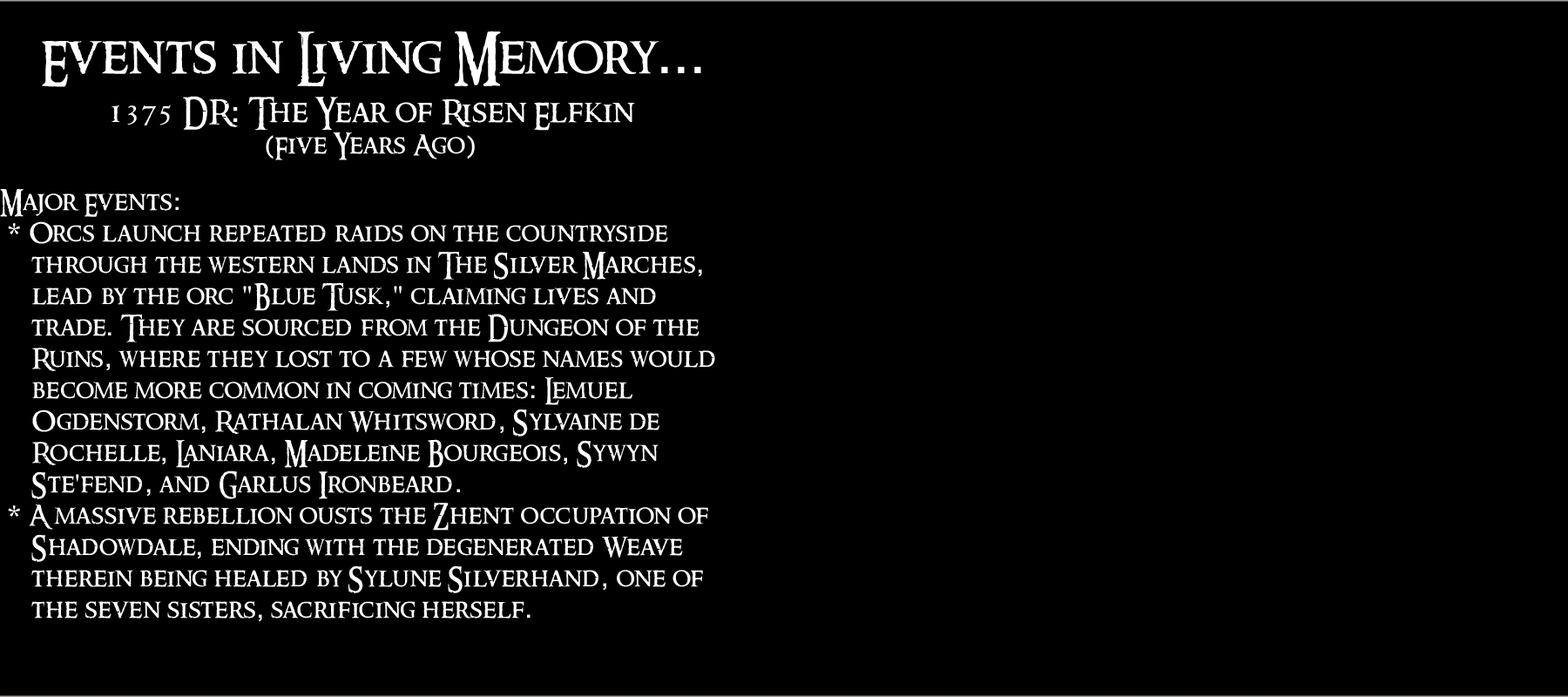
<style>
.page{position:relative;width:1568px;height:697px;background:#000000}
.page>*{position:absolute;margin:0}
.t1{font:26.1px "RingbearerMedium";letter-spacing:0.025em;color:#ffffff}
.t2{font:15.7px "RingbearerMedium";letter-spacing:0.025em;color:#ffffff}
.t3{font:52.3px "RingbearerMedium";letter-spacing:0.025em;color:#ffffff}
.t4{font:52.3px "Rockwell";letter-spacing:0.025em;color:#ffffff}
.t5{font:31.4px "RingbearerMedium";letter-spacing:0.025em;color:#ffffff}
.t6{font:31.4px "Rockwell";letter-spacing:0.025em;color:#ffffff}
.t7{font:26.1px "Rockwell";letter-spacing:0.025em;color:#ffffff}
</style>
<div class="page">
<p class="t1" style="left:0px;top:31px;width:715px;height:590px;text-align:center"><span class="t2"><br></span><span class="t3">Events in Living Memory</span><span class="t4">...<br><br></span><span class="t5">1375 DR</span><span class="t6">:</span><span class="t5"> The Year of Risen Elfkin<br></span><span class="t7">(</span>Five Years Ago<span class="t7">)<br><br></span>Major Events<span class="t7">:<br> * </span>Orcs launch repeated raids on the countryside <br> through the western lands in The Silver Marches<span class="t7">,<br></span> lead by the orc <span class="t7">"</span>Blue Tusk<span class="t7">,"</span> claiming lives and <br> trade<span class="t7">.</span> They are sourced from the Dungeon of the <br> Ruins<span class="t7">,</span> where they lost to a few whose names would <br> become more common in coming times<span class="t7">:</span> Lemuel <br> Ogdenstorm<span class="t7">,</span> Rathalan Whitsword<span class="t7">,</span> Sylvaine de <br> Rochelle<span class="t7">,</span> Laniara<span class="t7">,</span> Madeleine Bourgeois<span class="t7">,</span> Sywyn <br> Ste<span class="t7">'</span>fend<span class="t7">,</span> and Garlus Ironbeard<span class="t7">.<br> * </span>A massive rebellion ousts the Zhent occupation of <br> Shadowdale<span class="t7">,</span> ending with the degenerated Weave <br> therein being healed by Sylune Silverhand<span class="t7">,</span> one of <br> the seven sisters<span class="t7">, </span>sacrificing herself<span class="t7">.</span></p>
</div>
